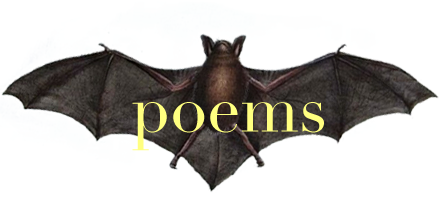
<style>
.page{position:relative;width:442px;height:216px;background:#ffffff}
.page>*{position:absolute;margin:0}
.t1{font:66.7px "Didot";color:#ffff80}
</style>
<div class="page">
<p class="t1" style="left:132px;top:102px;width:192px;height:49px">poems</p>
</div>
